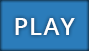
<style>
.page{position:relative;width:89px;height:51px;background:#2b7cba}
.page>*{position:absolute;margin:0}
.t1{font:24px "OpenSans-Semibold";letter-spacing:0.05em;color:#ffffff}
</style>
<div class="page">
<p class="t1" style="left:15px;top:18px;width:60px;height:17px">PLAY</p>
</div>
